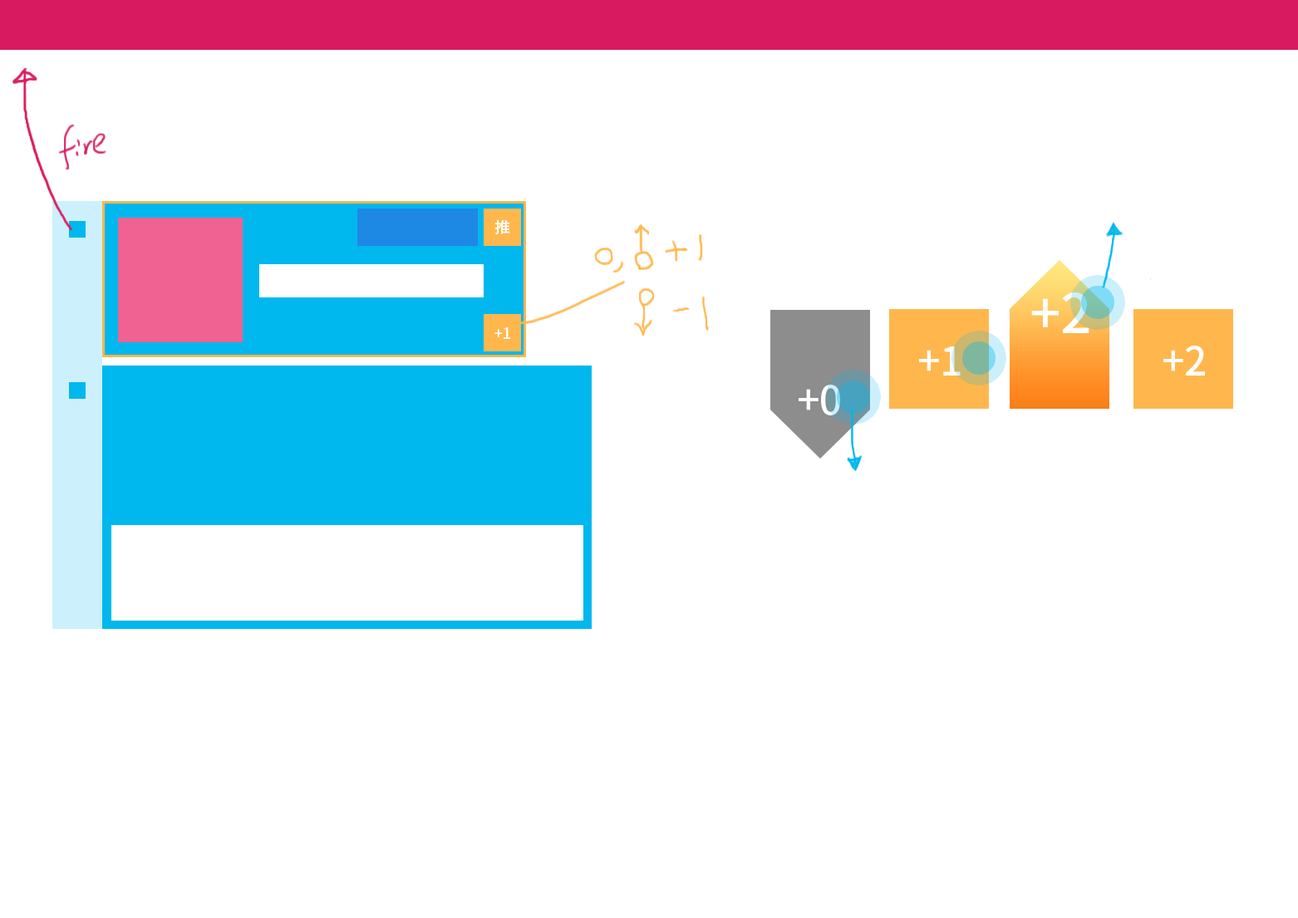
<style>
.page{position:relative;width:1298px;height:918px;background:#ffffff}
.page>*{position:absolute;margin:0}
.t1{font:15px "NotoSansCJKtc-Medium";color:#ffffff}
.t2{font:54.4px "NotoSansCJKtc-Medium";color:#ffffff}
.t3{font:39.9px "NotoSansCJKtc-Medium";color:#ffffff}
</style>
<div class="page">
<p class="t1" style="left:495px;top:219px;width:15px;height:15px">推</p>
<p class="t2" style="left:1031px;top:293px;width:59px;height:40px">+2</p>
<p class="t1" style="left:495px;top:327px;width:15px;height:12px">+1</p>
<p class="t3" style="left:919px;top:347px;width:42px;height:29px">+1</p>
<p class="t3" style="left:1164px;top:346px;width:41px;height:30px">+2</p>
<p class="t3" style="left:799px;top:385px;width:41px;height:31px">+0</p>
</div>
